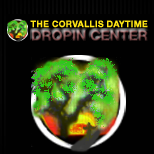
<style>
.page{position:relative;width:154px;height:154px;background:#010101}
.page>*{position:absolute;margin:0}
.t1{font:8.8px "HelveticaNeueLTPro-Bd";color:#ffe514;font-weight:bold}
</style>
<div class="page">
<p class="t1" style="left:30px;top:20px;width:118px;height:8px">THE CORVALLIS DAYTIME</p>
</div>
